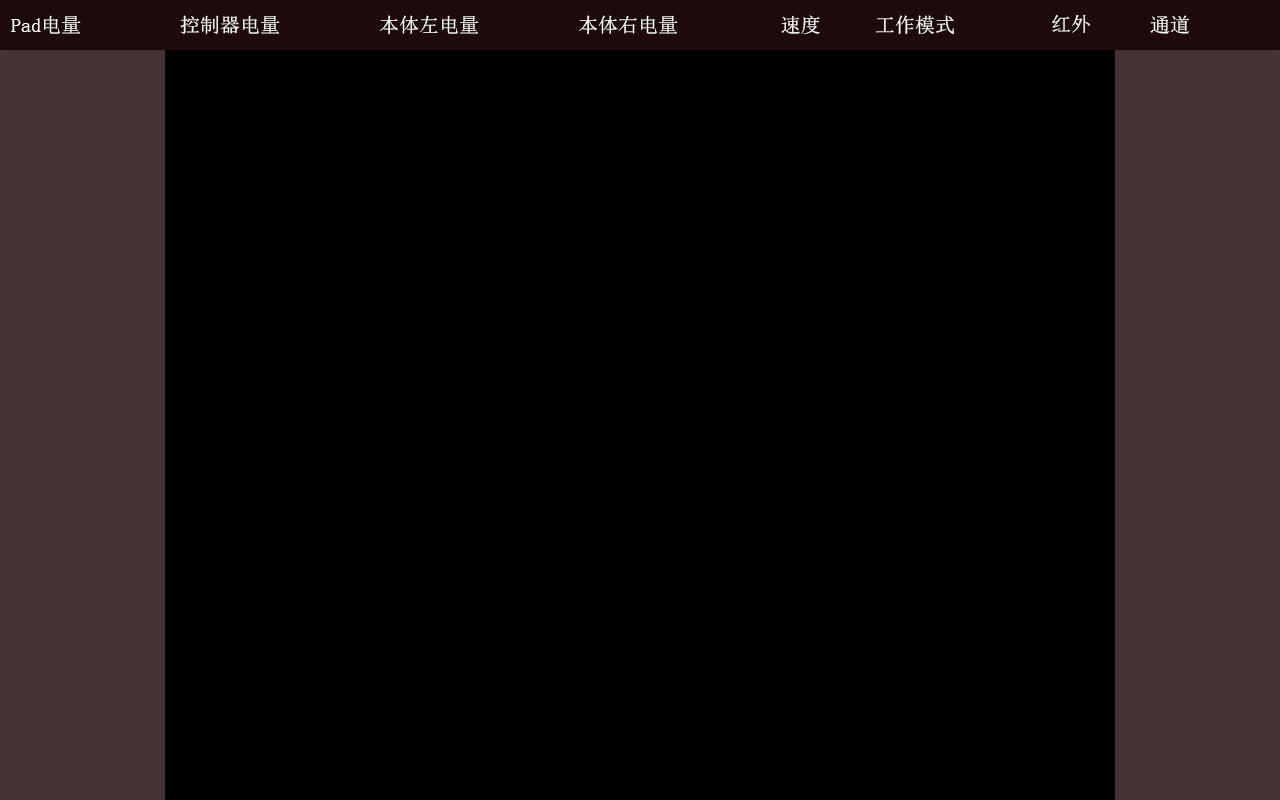
<style>
.page{position:relative;width:1280px;height:800px;background:#000000}
.page>*{position:absolute;margin:0}
.t1{font:20px "SimSun";color:#ffffff}
</style>
<div class="page">
<p class="t1" style="left:11px;top:15px;width:70px;height:19px">Pad电量</p>
<p class="t1" style="left:180px;top:15px;width:100px;height:19px">控制器电量</p>
<p class="t1" style="left:379px;top:15px;width:100px;height:20px">本体左电量</p>
<p class="t1" style="left:578px;top:15px;width:100px;height:20px">本体右电量</p>
<p class="t1" style="left:781px;top:15px;width:39px;height:20px">速度</p>
<p class="t1" style="left:876px;top:15px;width:79px;height:20px">工作模式</p>
<p class="t1" style="left:1052px;top:14px;width:38px;height:19px">红外</p>
<p class="t1" style="left:1150px;top:15px;width:39px;height:19px">通道</p>
</div>
